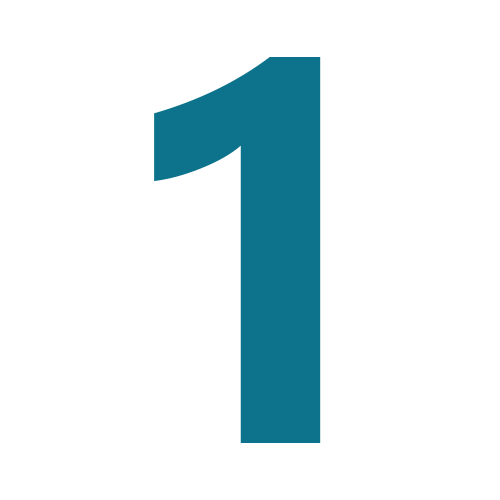
<style>
.page{position:relative;width:500px;height:500px;background:#ffffff}
.page>*{position:absolute;margin:0}
.t1{font:500px "MicrosoftYaHei-Bold";color:#0d738c}
</style>
<div class="page">
<p class="t1" style="left:154px;top:57px;width:167px;height:386px">1</p>
</div>
